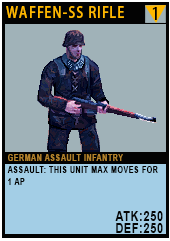
<style>
.page{position:relative;width:170px;height:241px;background:#a0b2b8}
.page>*{position:absolute;margin:0}
.t1{font:15.1px "AdobeHeitiStd-Regular";letter-spacing:0.08em;color:#ffb800;text-transform:uppercase;scale:0.86 1}
.t2{font:17.4px "AdobeHeitiStd-Regular";letter-spacing:0.08em;color:#000000;text-transform:uppercase;scale:0.86 1}
.t3{font:9.3px/12px "Arial-BoldMT";letter-spacing:0.08em;color:#020100;text-transform:uppercase;scale:0.76 1}
.t4{font:9.3px/20.2px "Arial-BoldMT";letter-spacing:0.08em;color:#b4832c;text-transform:uppercase;scale:0.76 1}
.t5{font:13.9px/12px "Arial-BoldMT";letter-spacing:0.08em;color:#050606;text-transform:uppercase;scale:0.76 1}
</style>
<div class="page">
<p class="t1" style="left:6px;top:6px;width:118px;height:12px">Waffen-SS Rifle</p>
<p class="t2" style="left:152px;top:7px;width:5px;height:13px">1</p>
<p class="t3" style="left:7px;top:154px;width:156px;height:79px"><span class="t4">german assault infantry<br></span>Assault: This unit max moves for 1 ap<br><br><br><span class="t5">atk:250<br>def:250</span></p>
</div>
